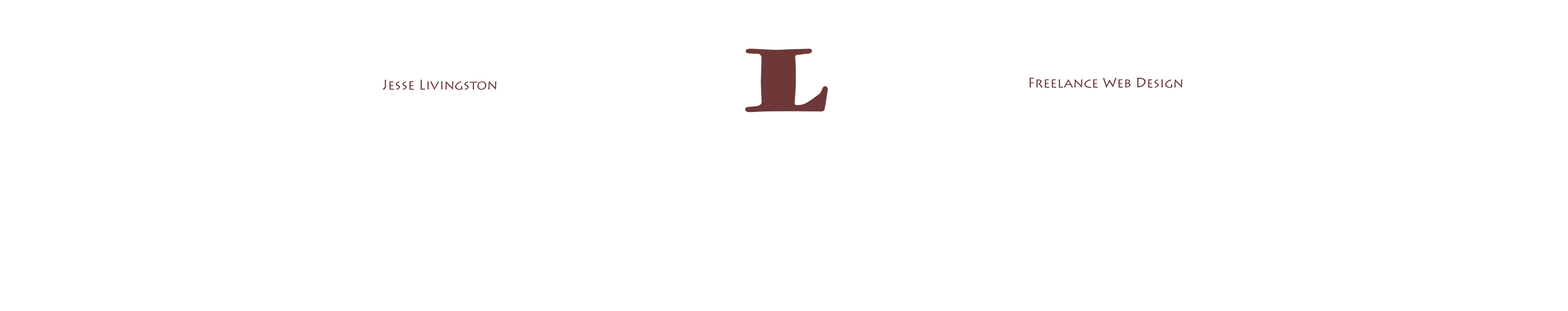
<style>
.page{position:relative;width:1568px;height:311px;background:#ffffff}
.page>*{position:absolute;margin:0}
.t1{font:83.3px "GoudyStout";color:#6e3838}
.t2{font:13.3px "LithosPro-Regular";color:#6e3838}
</style>
<div class="page">
<p class="t1" style="left:745px;top:48px;width:83px;height:64px">L</p>
<p class="t2" style="left:1029px;top:77px;width:153px;height:11px">Freelance Web Design</p>
<p class="t2" style="left:383px;top:80px;width:113px;height:10px">Jesse Livingston</p>
</div>
